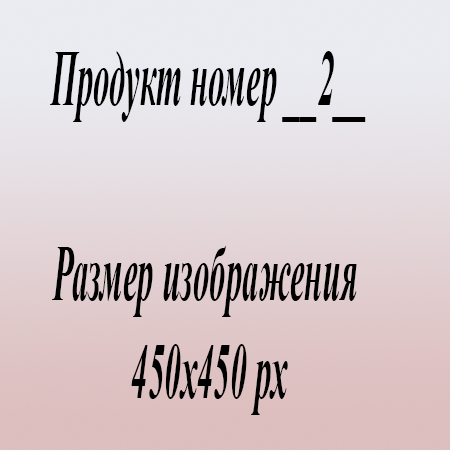
<style>
.page{position:relative;width:450px;height:450px}
.page>*{position:absolute;margin:0}
.t1{font:81.4px "TimesNewRomanPS-BoldItalicMT";color:#000000;scale:0.4 1}
</style>
<div class="page">
<p class="t1" style="left:50px;top:51px;width:316px;height:364px;text-align:center">Продукт номер __2__<br><br>Размер изображения <br>450х450 px</p>
</div>
